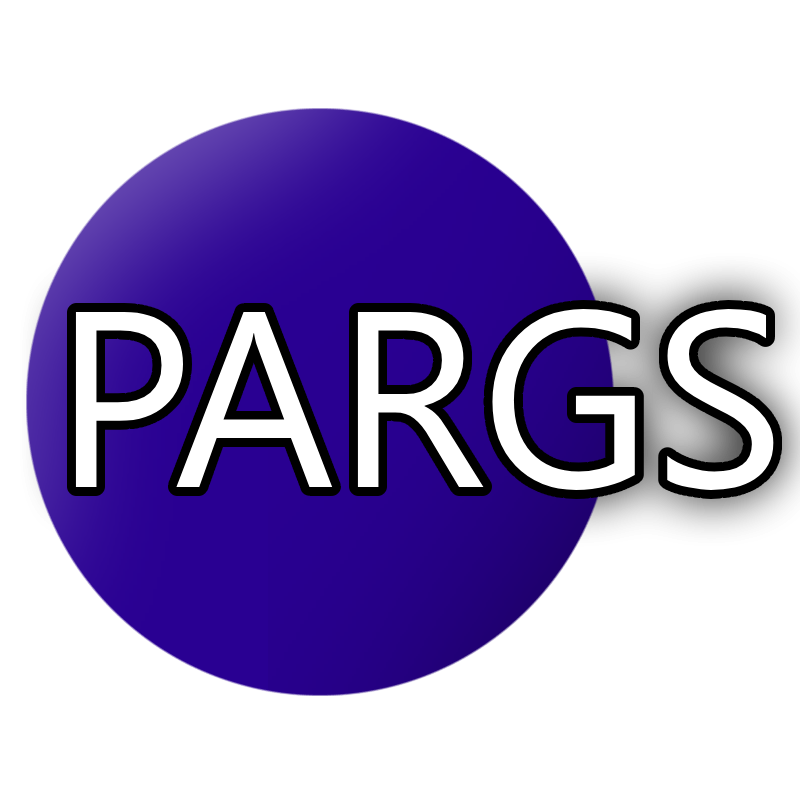
<style>
.page{position:relative;width:800px;height:800px;background:#ffffff}
.page>*{position:absolute;margin:0}
.t1{font:250px "SegoeUIHistoric";color:#ffffff}
</style>
<div class="page">
<p class="t1" style="left:75px;top:309px;width:699px;height:181px">PARGS</p>
<p class="t1" style="left:75px;top:309px;width:699px;height:181px">PARGS</p>
</div>
